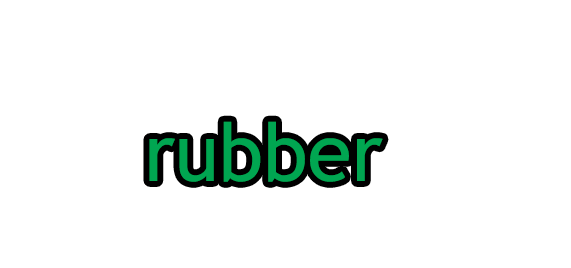
<style>
.page{position:relative;width:571px;height:268px;background:#ffffff}
.page>*{position:absolute;margin:0}
.t1{font:80px "TrebuchetMS";color:#00a651}
</style>
<div class="page">
<p class="t1" style="left:149px;top:121px;width:234px;height:61px">rubber</p>
</div>
